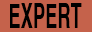
<style>
.page{position:relative;width:92px;height:32px;background:#c5624b}
.page>*{position:absolute;margin:0}
.t1{font:34px "Helvetica-Bold";color:#000000;scale:0.54 1}
</style>
<div class="page">
<p class="t1" style="left:10px;top:3px;width:72px;height:25px">EXPERT</p>
</div>
